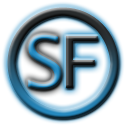
<style>
.page{position:relative;width:128px;height:128px;background:#ffffff}
.page>*{position:absolute;margin:0}
.t1{font:72px "LucidaSans-Typewriter";text-transform:uppercase}
</style>
<div class="page">
<p class="t1" style="left:28px;top:34px;width:34px;height:56px">S</p>
<p class="t1" style="left:66px;top:36px;width:33px;height:52px">f</p>
</div>
